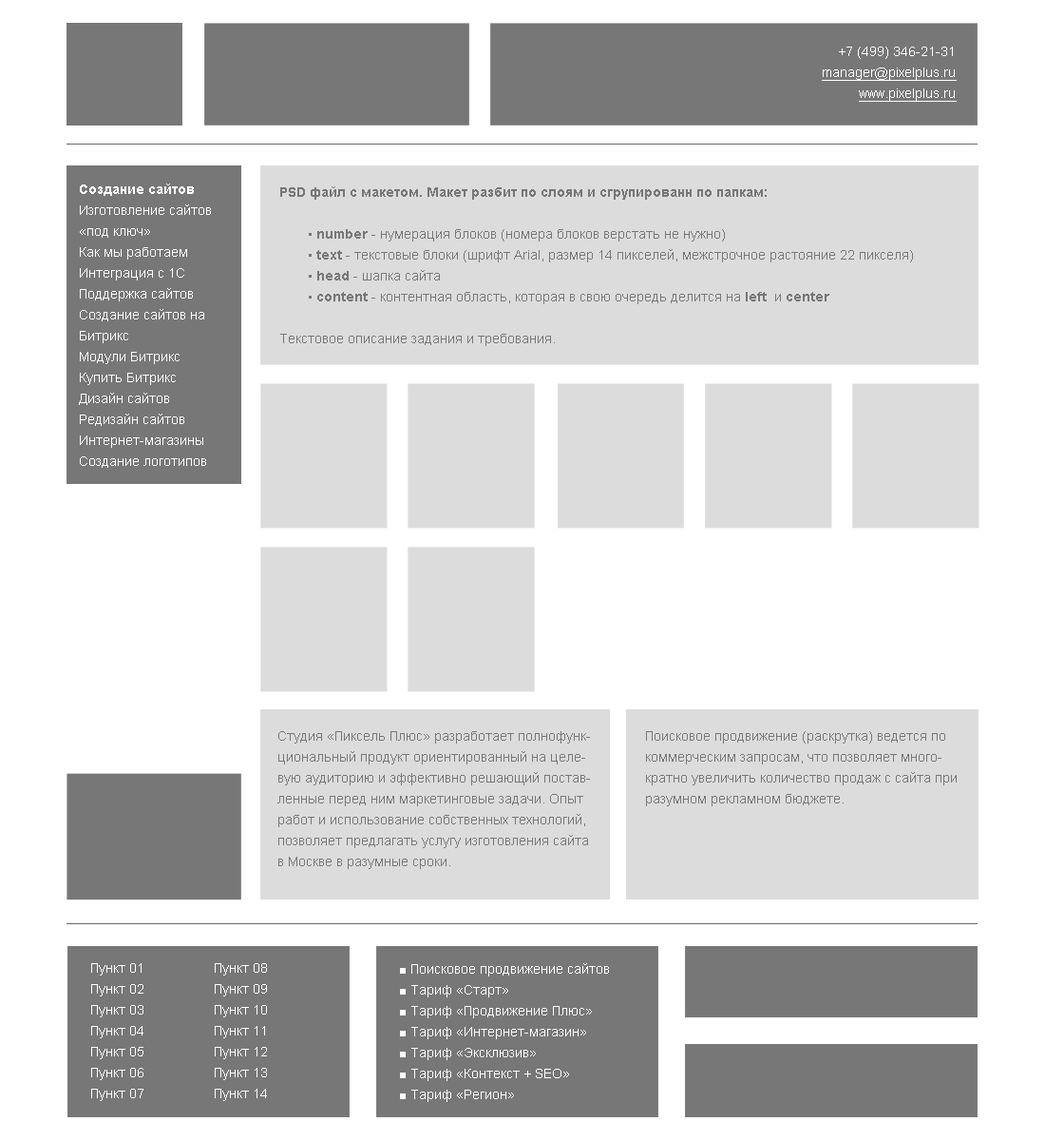
<style>
.page{position:relative;width:1045px;height:1141px;background:#ffffff}
.page>*{position:absolute;margin:0}
.t1{font:13.3px/20.9px "ArialMT";color:#ffffff;text-decoration:underline}
.t2{font:13.3px/20.9px "ArialMT";color:#ffffff}
.t3{font:13.3px/20.9px "Arial-BoldMT";color:#ffffff}
.t4{font:13.3px/20.9px "ArialMT";color:#777777}
.t5{font:13.3px/20.9px "Arial-BoldMT";color:#777777}
</style>
<div class="page">
<p class="t1" style="left:822px;top:47px;width:135px;height:55px;text-align:right"><span class="t2"><br>+7 (499) 346-21-31<br></span>manager@pixelplus.ru<br>www.pixelplus.ru</p>
<p class="t2" style="left:79px;top:183px;width:132px;height:285px"><span class="t3">Создание сайтов<br></span>Изготовление сайтов «под ключ»<br>Как мы работаем<br>Интеграция с 1С<br>Поддержка сайтов<br>Создание сайтов на Битрикс<br>Модули Битрикс<br>Купить Битрикс<br>Дизайн сайтов<br>Редизайн сайтов<br>Интернет-магазины<br>Создание логотипов<br>FAQ</p>
<p class="t4" style="left:280px;top:186px;width:633px;height:160px"><span class="t5">PSD файл с макетом. Макет разбит по слоям и сгрупированн по папкам: <br></span><br>• <span class="t5">number </span>- нумерация блоков (номера блоков верстать не нужно)<br>• <span class="t5">text </span>- текстовые блоки (шрифт Arial, размер 14 пикселей, межстрочное растояние 22 пикселя)<br>• <span class="t5">head </span>- шапка сайта<br>• <span class="t5">content </span>- контентная область, которая в свою очередь делится на <span class="t5">left  </span>и <span class="t5">center </span><br><br>Текстовое описание задания и требования.</p>
<p class="t4" style="left:278px;top:731px;width:312px;height:138px">Студия «Пиксель Плюс» разработает полнофункциональный продукт ориентированный на целевую аудиторию и эффективно решающий поставленные перед ним маркетинговые задачи. Опыт работ и использование собственных технологий, позволяет предлагать услугу изготовления сайта в Москве в разумные сроки.</p>
<p class="t4" style="left:646px;top:731px;width:311px;height:75px">Поисковое продвижение (раскрутка) ведется по коммерческим запросам, что позволяет многократно увеличить количество продаж с сайта при разумном рекламном бюджете.</p>
<p class="t2" style="left:91px;top:963px;width:53px;height:138px">Пункт 01<br>Пункт 02<br>Пункт 03<br>Пункт 04<br>Пункт 05<br>Пункт 06<br>Пункт 07</p>
<p class="t2" style="left:215px;top:963px;width:52px;height:138px">Пункт 08<br>Пункт 09<br>Пункт 10<br>Пункт 11<br>Пункт 12<br>Пункт 13<br>Пункт 14</p>
<p class="t2" style="left:400px;top:963px;width:209px;height:139px">■ Поисковое продвижение сайтов<br>■ Тариф «Старт»<br>■ Тариф «Продвижение Плюс»<br>■ Тариф «Интернет-магазин»<br>■ Тариф «Эксклюзив»<br>■ Тариф «Контекст + SEO»<br>■ Тариф «Регион»</p>
</div>
